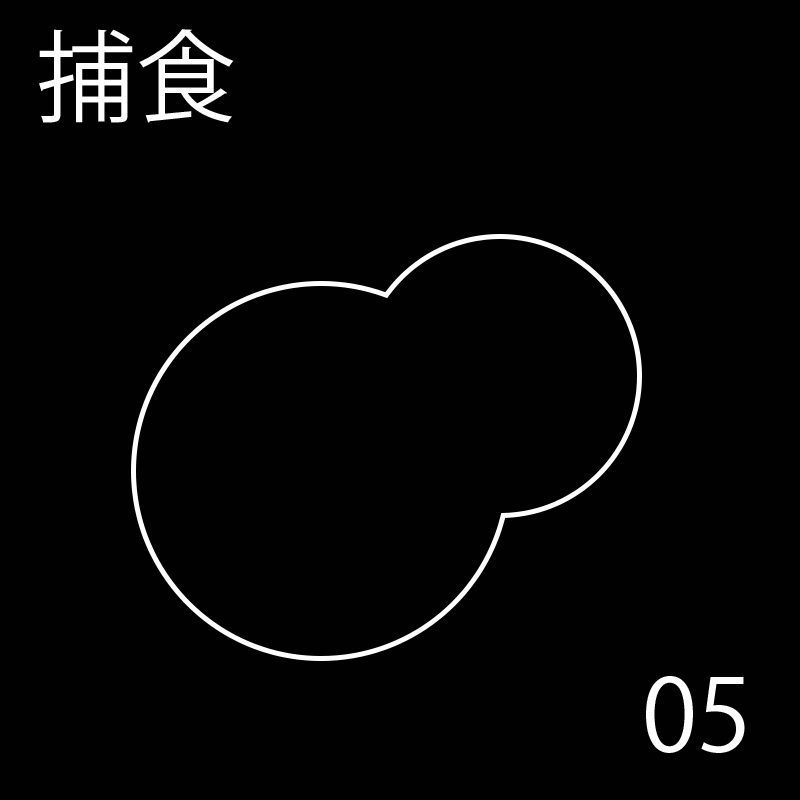
<style>
.page{position:relative;width:800px;height:800px;background:#010101}
.page>*{position:absolute;margin:0}
.t1{font:100px "KozGoPr6N-Regular";color:#ffffff}
</style>
<div class="page">
<p class="t1" style="left:39px;top:29px;width:195px;height:94px">捕食</p>
<p class="t1" style="left:39px;top:29px;width:195px;height:94px">捕食</p>
<p class="t1" style="left:39px;top:29px;width:195px;height:94px">捕食</p>
<p class="t1" style="left:39px;top:29px;width:195px;height:94px">捕食</p>
<p class="t1" style="left:39px;top:29px;width:195px;height:94px">捕食</p>
<p class="t1" style="left:39px;top:29px;width:195px;height:94px">捕食</p>
<p class="t1" style="left:646px;top:676px;width:102px;height:77px">00</p>
<p class="t1" style="left:646px;top:676px;width:85px;height:77px">01</p>
<p class="t1" style="left:646px;top:676px;width:101px;height:77px">02</p>
<p class="t1" style="left:646px;top:676px;width:99px;height:77px">03</p>
<p class="t1" style="left:646px;top:676px;width:105px;height:77px">04</p>
<p class="t1" style="left:646px;top:676px;width:99px;height:77px">05</p>
</div>
